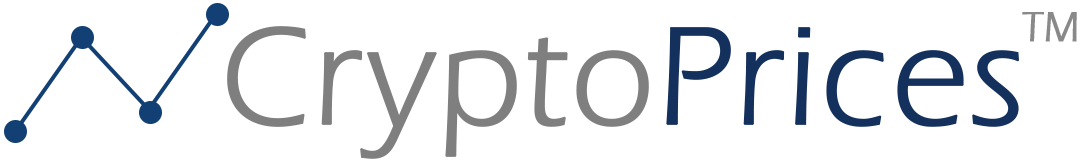
<style>
.page{position:relative;width:1080px;height:160px;background:#ffffff}
.page>*{position:absolute;margin:0}
.t1{font:42.1px "ITCErasStd-Book";color:#898989;font-weight:bold}
.t2{font:144.7px "ITCErasStd-Book";color:#7f7f7f;font-weight:bold}
.t3{font:144.7px "ITCErasStd-Book";color:#13315c;font-weight:bold}
</style>
<div class="page">
<p class="t1" style="left:1022px;top:12px;width:55px;height:30px">TM</p>
<p class="t2" style="left:227px;top:26px;width:792px;height:133px">Crypto<span class="t3">Prices</span></p>
</div>
